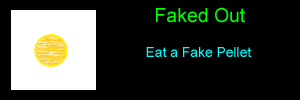
<style>
.page{position:relative;width:300px;height:100px;background:#000000}
.page>*{position:absolute;margin:0}
.t1{font:19.4px "ArialMT";color:#00ff00}
.t2{font:13.9px "ArialMT";color:#00ffff}
</style>
<div class="page">
<p class="t1" style="left:156px;top:7px;width:89px;height:16px">Faked Out</p>
<p class="t2" style="left:146px;top:47px;width:106px;height:10px">Eat a Fake Pellet</p>
</div>
